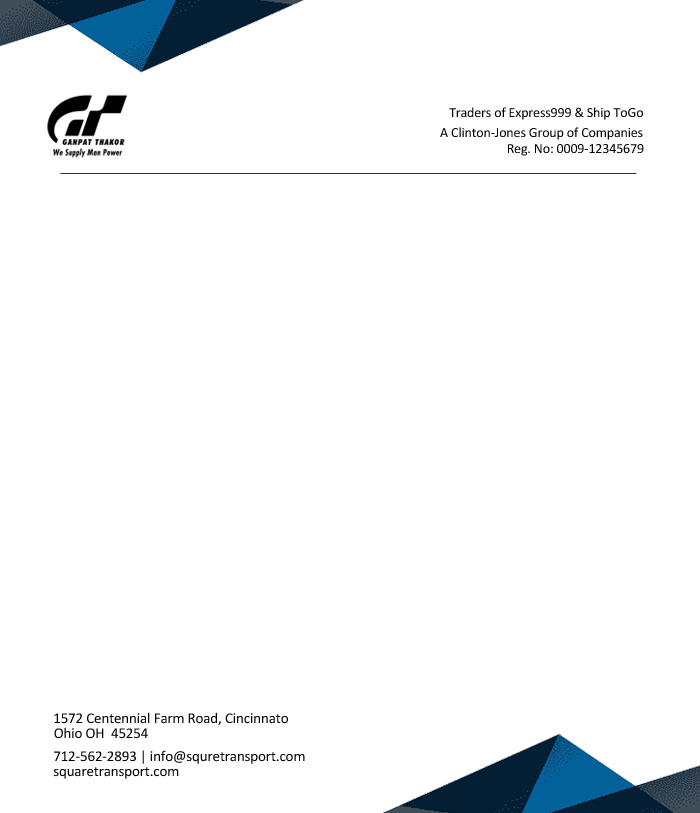
<style>
.page{position:relative;width:700px;height:813px;background:#ffffff}
.page>*{position:absolute;margin:0}
.t1{font:14px "Calibri";letter-spacing:-0.01em;color:#000000}
.t2{font:14px "Calibri";letter-spacing:-0.01em;color:#010101}
.t3{font:15px "Calibri";letter-spacing:-0.01em;color:#000000}
.t4{font:15px "Calibri";letter-spacing:-0.01em;color:#010101}
</style>
<div class="page">
<p class="t1" style="left:449px;top:107px;width:194px;height:13px">Traders of Express999 &amp; Ship ToGo</p>
<p class="t2" style="left:440px;top:127px;width:203px;height:13px">A Clinton-Jones Group of Companies</p>
<p class="t1" style="left:508px;top:144px;width:136px;height:12px">Reg. No: 0009-12345679</p>
<p class="t3" style="left:54px;top:712px;width:234px;height:13px">1572 Centennial Farm Road, Cincinnato</p>
<p class="t3" style="left:54px;top:727px;width:94px;height:12px">Ohio OH  45254</p>
<p class="t3" style="left:54px;top:750px;width:251px;height:14px">712-562-2893 | info@squretransport.com</p>
<p class="t4" style="left:53px;top:767px;width:126px;height:12px">squaretransport.com</p>
</div>
